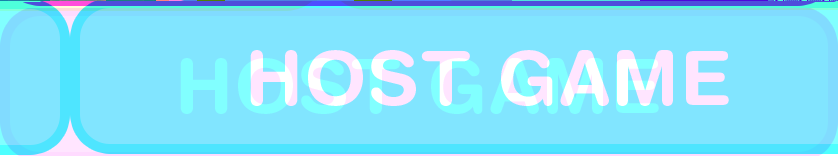
<style>
.page{position:relative;width:838px;height:156px;background:#81e5ff}
.page>*{position:absolute;margin:0}
.t1{font:74.7px "HelveticaRoundedLTStd-Bd";letter-spacing:0.025em}
</style>
<div class="page">
<p class="t1" style="left:180px;top:50px;width:479px;height:56px">HOST GAME</p>
</div>
